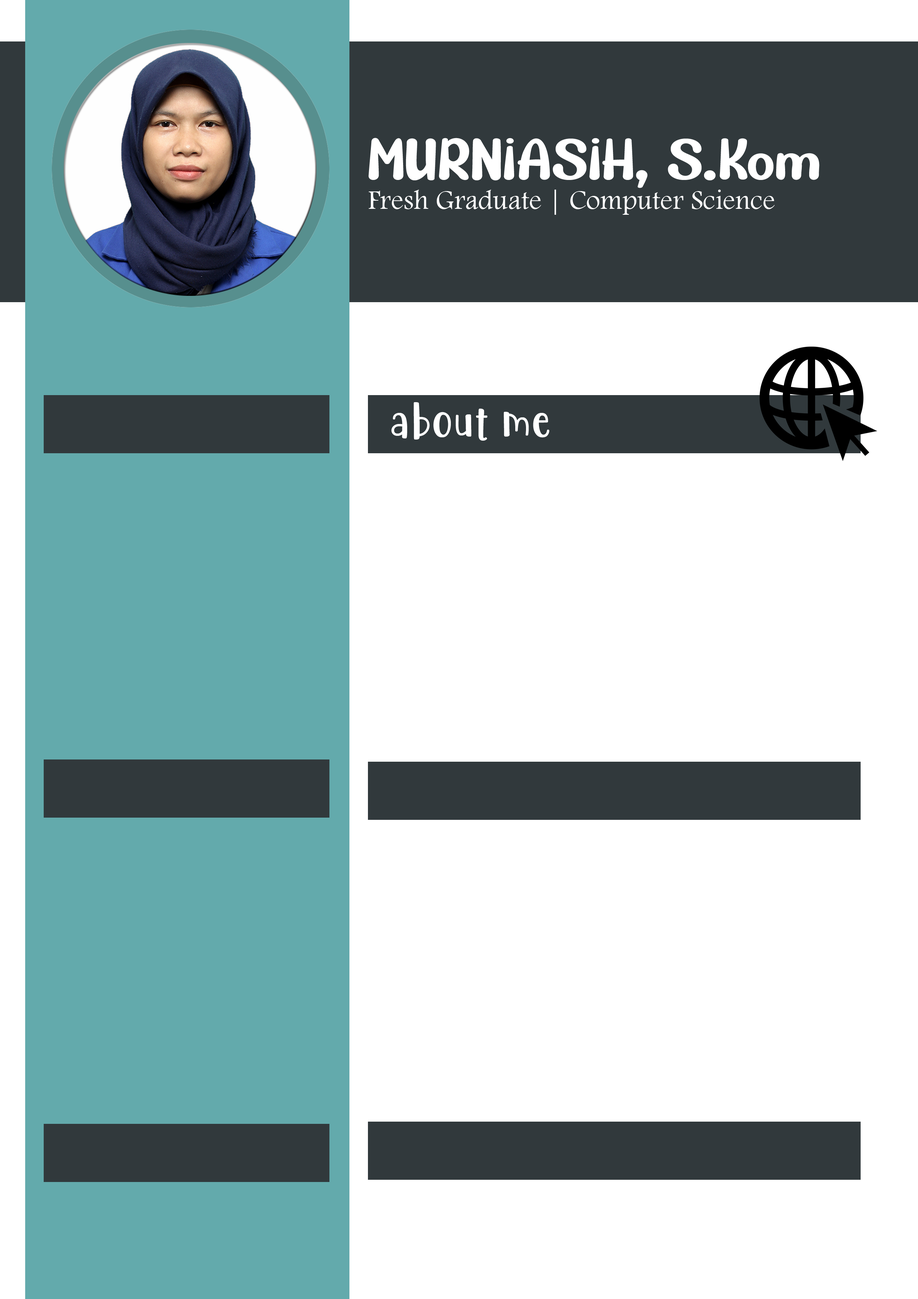
<style>
.page{position:relative;width:918px;height:1299px;background:#ffffff}
.page>*{position:absolute;margin:0}
.t1{font:55.5px "CUTEFROG-Regular";color:#ffffff}
.t2{font:27.8px "FootlightMTLight";color:#ffffff}
.t3{font:46.3px "CuteBeSpecial";color:#ffffff}
</style>
<div class="page">
<p class="t1" style="left:368px;top:138px;width:452px;height:50px">MURNIASIH, S.Kom</p>
<p class="t2" style="left:369px;top:190px;width:406px;height:25px">Fresh Graduate | Computer Science</p>
<p class="t3" style="left:391px;top:402px;width:158px;height:39px">about me</p>
</div>
